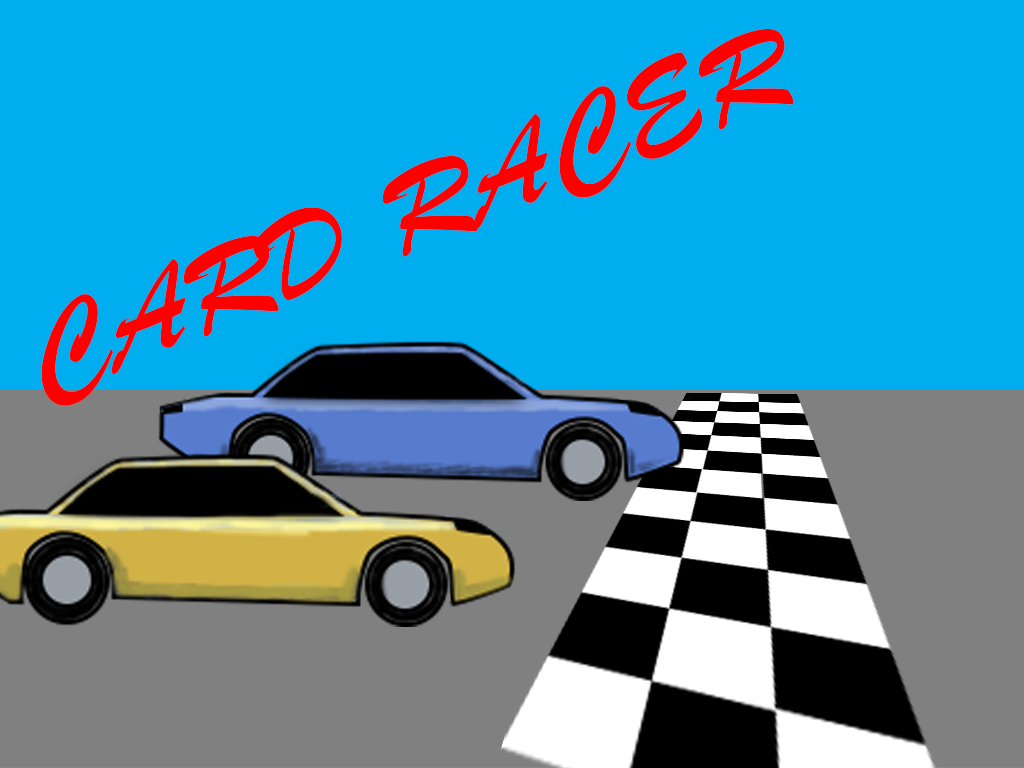
<style>
.page{position:relative;width:1024px;height:768px;background:#00aeef}
.page>*{position:absolute;margin:0}
.t1{font:123px "BrushScriptMT";color:#ff0000;scale:1.1 1}
</style>
<div class="page">
<p class="t1" style="left:41px;top:28px;width:753px;height:378px;rotate:-22deg">CARD RACER</p>
</div>
